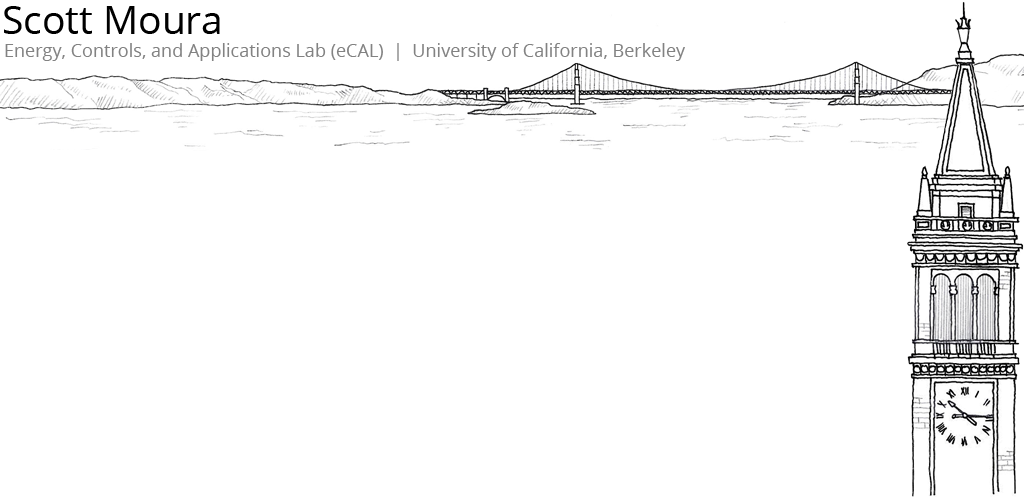
<style>
.page{position:relative;width:1024px;height:499px;background:#ffffff}
.page>*{position:absolute;margin:0}
.t1{font:38.9px "OpenSans";color:#000000}
.t2{font:18.1px "OpenSans";color:#828282}
</style>
<div class="page">
<p class="t1" style="left:4px;top:6px;width:216px;height:28px">Scott Moura</p>
<p class="t2" style="left:5px;top:43px;width:680px;height:18px">Energy, Controls, and Applications Lab (eCAL)  |  University of California, Berkeley</p>
</div>
